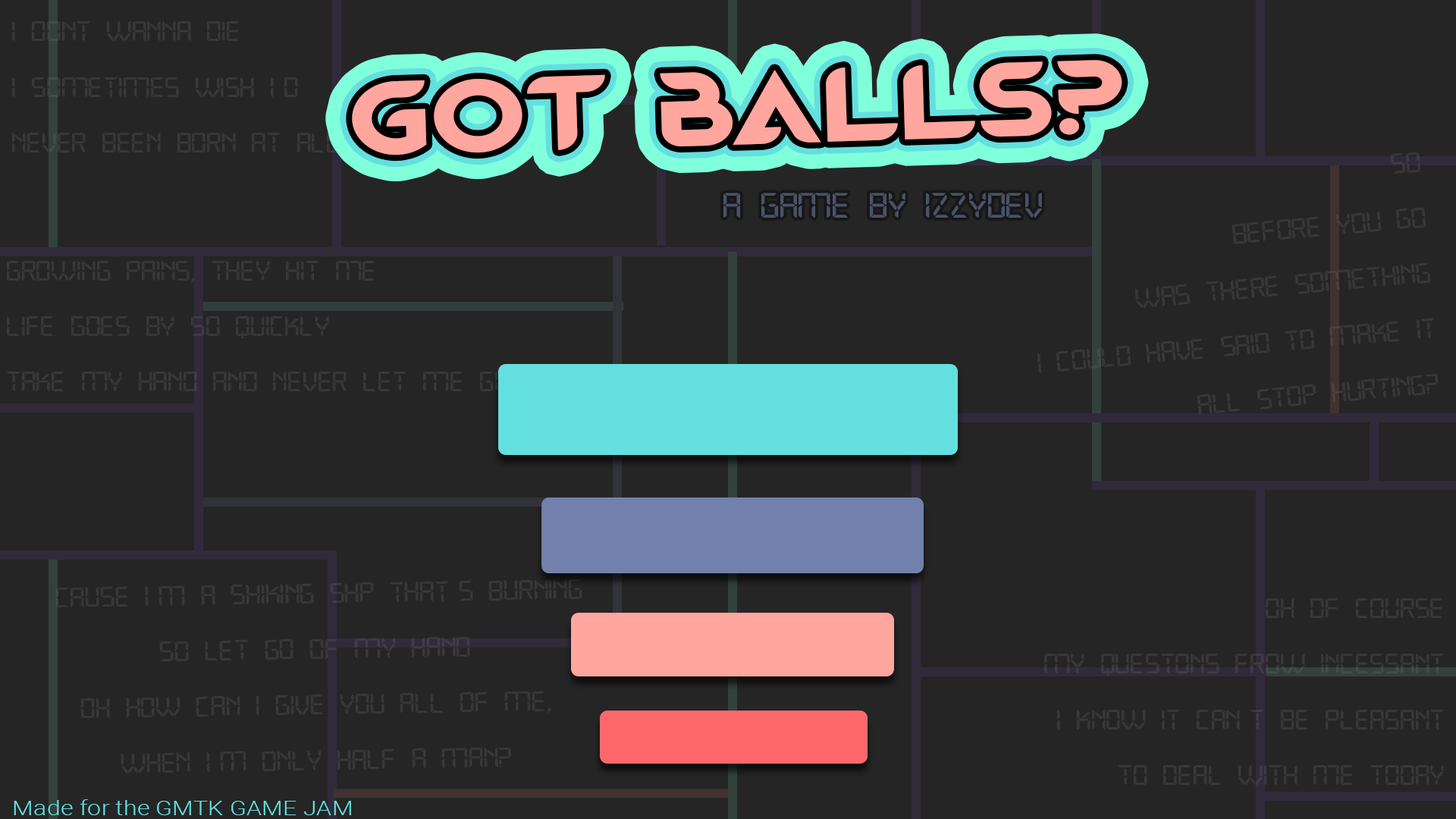
<style>
.page{position:relative;width:1456px;height:819px;background:#252525}
.page>*{position:absolute;margin:0}
.t1{font:28.3px/55.6px "Open24DisplaySt";color:#383838;scale:1.2 1}
.t2{font:102.2px "MagmawaveCaps-Bold";color:#ffa69e;scale:1.2 1}
.t3{font:35.4px "Open24DisplaySt";color:#4a526a;scale:1.2 1}
.t4{font:20.6px "Roboto-Light";color:#64dfdf;scale:1.2 1}
</style>
<div class="page">
<p class="t1" style="left:12px;top:20px;width:327px;height:132px">I dont wanna die<br>I sometimes wish i’d<br>Never been born at all</p>
<p class="t2" style="left:352px;top:60px;width:770px;height:95px;rotate:-2deg">GOT BALLS?</p>
<p class="t2" style="left:352px;top:60px;width:770px;height:95px;rotate:-2deg">GOT BALLS?</p>
<p class="t2" style="left:352px;top:60px;width:770px;height:95px;rotate:-2deg">GOT BALLS?</p>
<p class="t1" style="left:1037px;top:152px;width:402px;height:263px;text-align:right;rotate:-5deg">So<br>Before you Go<br>Was there something<br>I could have said to make it<br>All stop hurting?</p>
<p class="t3" style="left:723px;top:193px;width:319px;height:25px">A game by IzzyDev</p>
<p class="t1" style="left:7px;top:260px;width:502px;height:131px">Growing pains, they hit me<br>Life goes by so quickly<br>Take my hand and never let me go</p>
<p class="t1" style="left:55px;top:579px;width:527px;height:194px;text-align:center;rotate:-1deg">‘CAUSE I’m a shiking shp that’s burning<br>So let go of my hand<br>Oh how can I give you all of Me,<br>When I’m only half a man?</p>
<p class="t1" style="left:1044px;top:598px;width:400px;height:187px;text-align:right">Oh of course<br>My questons frow incessant<br>I know it can’t be pleasant<br>To deal with me today</p>
<p class="t4" style="left:14px;top:799px;width:337px;height:16px">Made for the GMTK GAME JAM</p>
</div>
